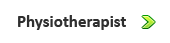
<style>
.page{position:relative;width:170px;height:43px;background:#ffffff}
.page>*{position:absolute;margin:0}
.t1{font:17px "Calibri-Bold";color:#2f2f2f}
</style>
<div class="page">
<p class="t1" style="left:18px;top:15px;width:108px;height:15px">Physiotherapist</p>
</div>
